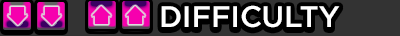
<style>
.page{position:relative;width:400px;height:36px;background:#333333}
.page>*{position:absolute;margin:0}
.t1{font:29.6px "Gotham-Medium";color:#ffffff}
</style>
<div class="page">
<p class="t1" style="left:161px;top:5px;width:179px;height:23px">DIFFICULTY</p>
</div>
